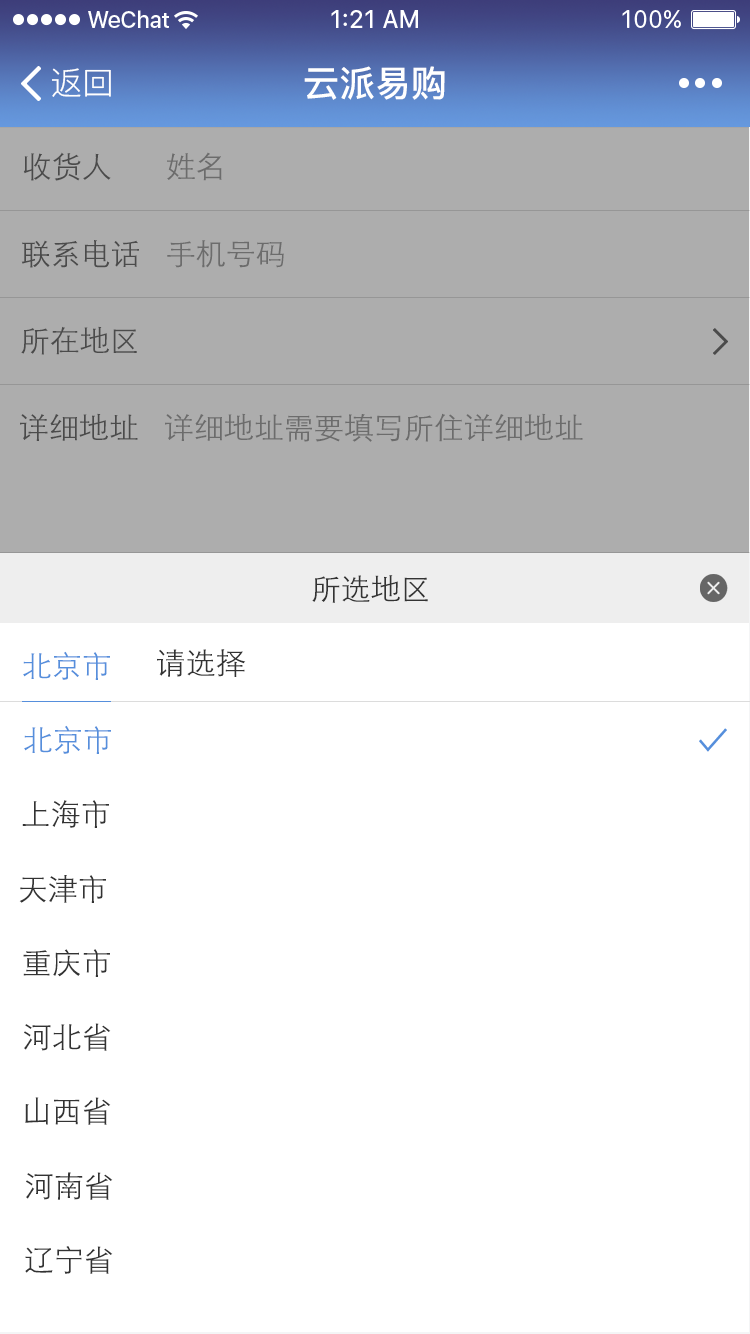
<style>
.page{position:relative;width:750px;height:1334px;background:#ffffff}
.page>*{position:absolute;margin:0}
.t1{font:32px "PingFang-SC-Regular";color:#ffffff}
.t2{font:36px "PingFang-SC-Bold";color:#ffffff}
.t3{font:30px "STXihei";color:#4b4b4b}
.t4{font:30px "STXihei";color:#6c6c6c}
.t5{font:30px "STXihei";color:#333333}
.t6{font:30px "STXihei";color:#568fdc}
</style>
<div class="page">
<p class="t1" style="left:52px;top:68px;width:59px;height:29px">返回</p>
<p class="t2" style="left:304px;top:66px;width:141px;height:34px">云派易购</p>
<p class="t3" style="left:23px;top:152px;width:88px;height:29px">收货人</p>
<p class="t4" style="left:167px;top:152px;width:55px;height:29px">姓名</p>
<p class="t3" style="left:21px;top:240px;width:118px;height:28px">联系电话</p>
<p class="t4" style="left:167px;top:240px;width:117px;height:28px">手机号码</p>
<p class="t3" style="left:21px;top:326px;width:116px;height:29px">所在地区</p>
<p class="t3" style="left:20px;top:413px;width:118px;height:28px">详细地址</p>
<p class="t4" style="left:165px;top:413px;width:418px;height:29px">详细地址需要填写所住详细地址</p>
<p class="t5" style="left:312px;top:575px;width:116px;height:28px">所选地区</p>
<p class="t6" style="left:23px;top:651px;width:87px;height:29px">北京市</p>
<p class="t5" style="left:157px;top:649px;width:89px;height:28px">请选择</p>
<p class="t6" style="left:24px;top:725px;width:87px;height:29px">北京市</p>
<p class="t5" style="left:22px;top:800px;width:87px;height:28px">上海市</p>
<p class="t5" style="left:19px;top:875px;width:87px;height:28px">天津市</p>
<p class="t5" style="left:23px;top:949px;width:87px;height:28px">重庆市</p>
<p class="t5" style="left:24px;top:1023px;width:87px;height:28px">河北省</p>
<p class="t5" style="left:25px;top:1097px;width:86px;height:28px">山西省</p>
<p class="t5" style="left:26px;top:1172px;width:87px;height:28px">河南省</p>
<p class="t5" style="left:25px;top:1246px;width:88px;height:28px">辽宁省</p>
</div>
